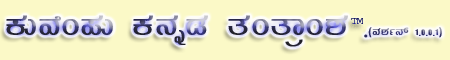
<style>
.page{position:relative;width:450px;height:60px;background:#fbf9c7}
.page>*{position:absolute;margin:0}
.t1{font:40px "Kuvempu_Eng_0005"}
.t2{font:30px "Kuvempu_Eng_0005"}
.t3{font:14px "Kuvempu_Eng_0005"}
.t4{font:10px "Courier"}
</style>
<div class="page">
<p class="t1" style="left:6px;top:15px;width:436px;height:32px"><span class="t2"> </span>PÀÄªÉA¥ÀÄ PÀ£ÀßqÀ vÀAvÁæA±À<span class="t2"> .</span><span class="t3">(ªÀ±Àð£ï 1.0.0.1)</span></p>
<p class="t4" style="left:351px;top:18px;width:12px;height:6px">TM</p>
</div>
